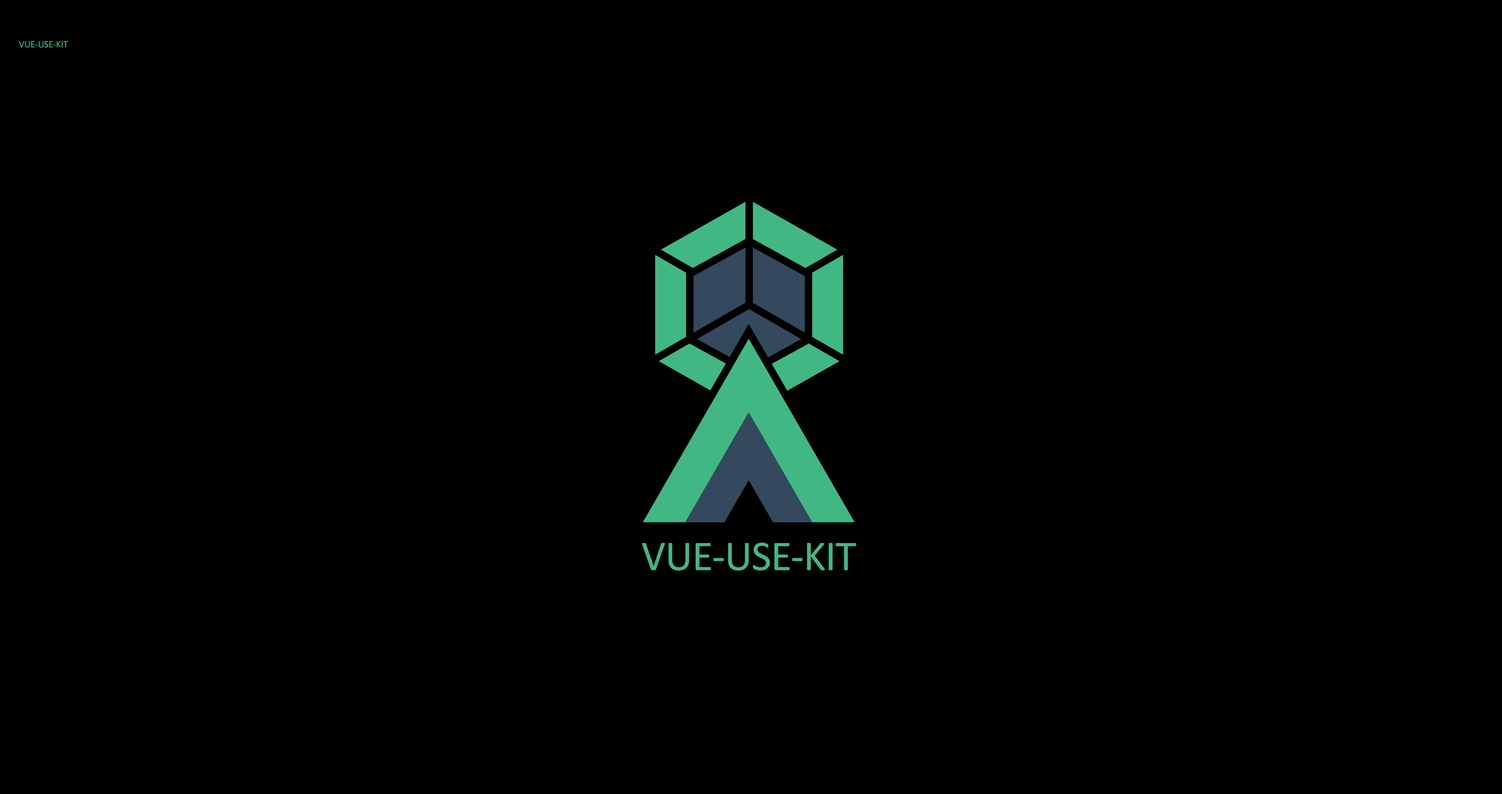
<style>
.page{position:relative;width:1502px;height:794px;background:#000000}
.page>*{position:absolute;margin:0}
.t1{font:9.8px "Calibri";letter-spacing:-0.01em;color:#41b883}
.t2{font:42.7px "Calibri";letter-spacing:-0.01em;color:#41b883}
</style>
<div class="page">
<p class="t1" style="left:19px;top:41px;width:49px;height:7px">VUE-USE-KIT</p>
<p class="t2" style="left:642px;top:543px;width:214px;height:28px">VUE-USE-KIT</p>
</div>
